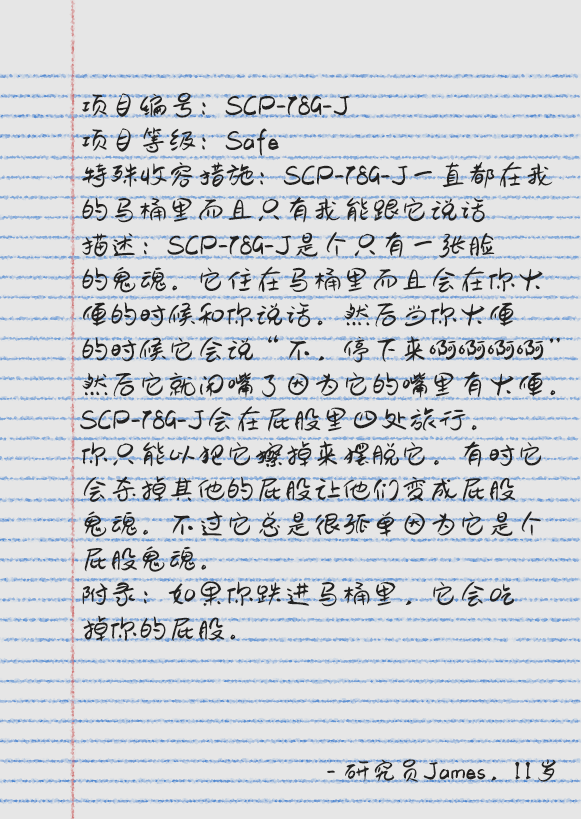
<style>
.page{position:relative;width:581px;height:819px;background:#e6e6e6}
.page>*{position:absolute;margin:0}
.t1{font:29.1px "AaMaozhuashaonv";color:#232221}
.t2{font:26.3px "AaMaozhuashaonv";color:#232221}
</style>
<div class="page">
<p class="t1" style="left:80px;top:92px;width:480px;height:550px;text-align:justify">项目编号：SCP-789-J<br>项目等级：Safe<br>特殊收容措施：SCP-789-J一直都在我<br>的马桶里而且只有我能跟它说话<br>描述：SCP-789-J是个只有一张脸<br>的鬼魂。它住在马桶里而且会在你大<br>便的时候和你说话。然后当你大便<br>的时候它会说“不，停下来啊啊啊啊”<br>然后它就闭嘴了因为它的嘴里有大便。<br>SCP-789-J会在屁股里四处旅行。<br>你只能以把它擦掉来摆脱它。有时它<br>会杀掉其他的屁股让他们变成屁股<br>鬼魂。不过它总是很孤单因为它是个<br>屁股鬼魂。<br>附录：如果你跌进马桶里，它会吃<br>掉你的屁股。</p>
<p class="t2" style="left:327px;top:759px;width:229px;height:23px">- 研究员James，11岁</p>
</div>
